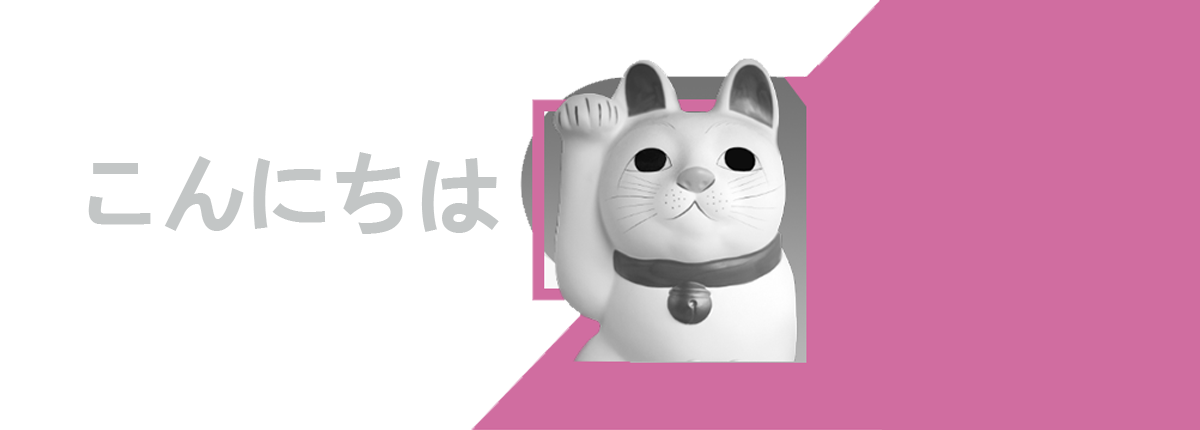
<style>
.page{position:relative;width:1200px;height:430px;background:#ffffff}
.page>*{position:absolute;margin:0}
.t1{font:88.5px "MicrosoftYaHei-Bold";letter-spacing:-0.05em;color:#c3c6c6}
</style>
<div class="page">
<p class="t1" style="left:88px;top:152px;width:411px;height:82px">こんにちは</p>
</div>
